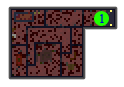
<style>
.page{position:relative;width:124px;height:87px;background:#ffffff}
.page>*{position:absolute;margin:0}
.t1{font:20px "TimesNewRomanPSMT";color:#0101dd}
</style>
<div class="page">
<p class="t1" style="left:100px;top:14px;width:4px;height:9px">1</p>
</div>
